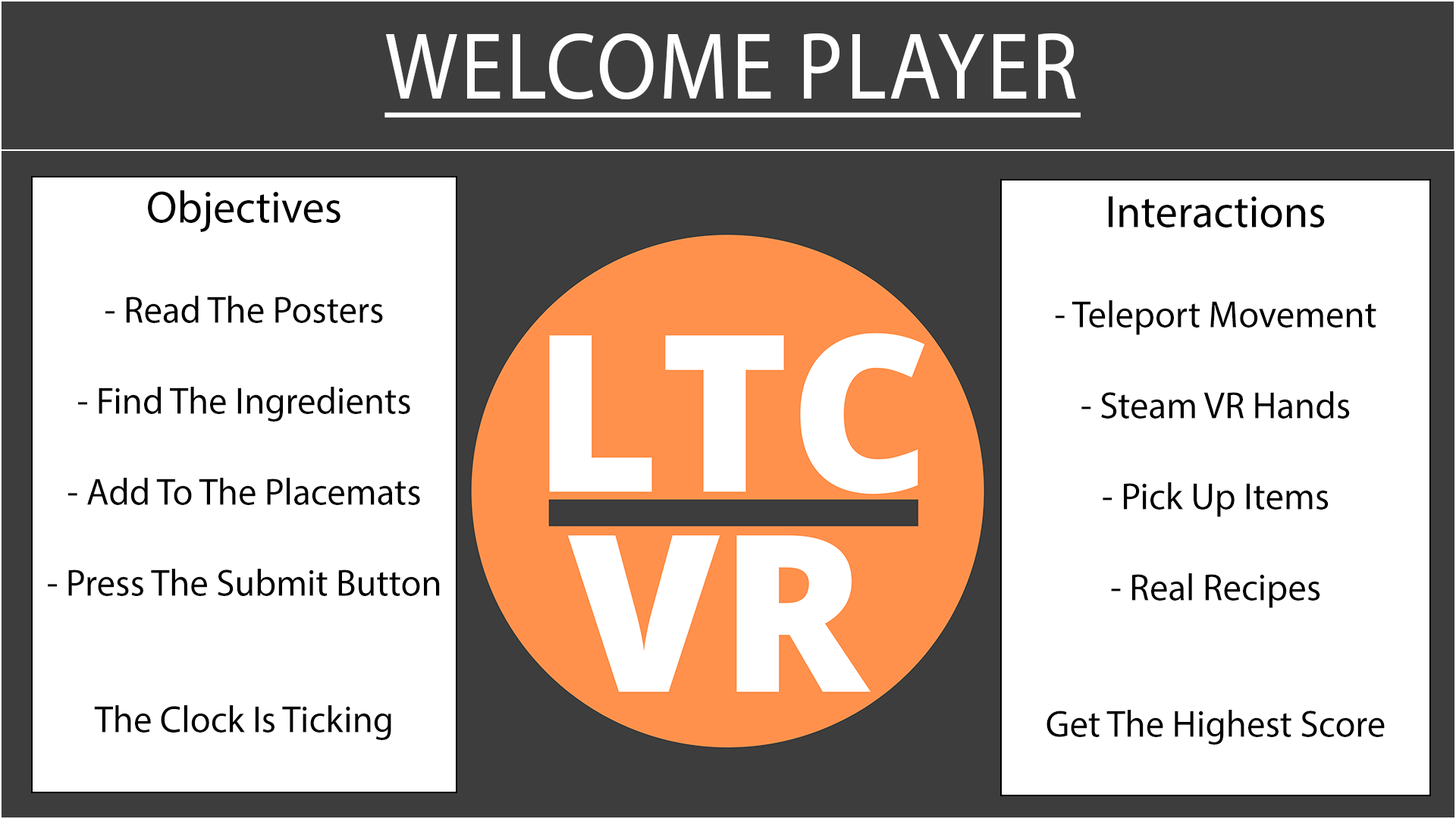
<style>
.page{position:relative;width:1456px;height:819px;background:#ffffff}
.page>*{position:absolute;margin:0}
.t1{font:95.7px "MyriadPro-Regular";letter-spacing:0.03em;color:#fffefe;text-decoration:underline;scale:0.9 1}
.t2{font:37.9px "MyriadPro-Regular";color:#000000}
.t3{font:45.5px "MyriadPro-Regular";color:#000000}
</style>
<div class="page">
<p class="t1" style="left:384px;top:33px;width:697px;height:85px">WELCOME PLAYER</p>
<p class="t2" style="left:48px;top:190px;width:392px;height:550px;text-align:justify"><span class="t3">Objectives<br><br></span>- Read The Posters<br><br>- Find The Ingredients<br><br>- Add To The Placemats<br><br>- Press The Submit Button<br><br><br>The Clock Is Ticking</p>
<p class="t2" style="left:1046px;top:196px;width:339px;height:549px;text-align:justify"><span class="t3">Interactions<br><br></span>- Teleport Movement<br><br>- Steam VR Hands<br><br>- Pick Up Items<br><br>- Real Recipes<br><br><br>Get The Highest Score</p>
</div>
